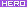
<style>
.page{position:relative;width:27px;height:7px;background:#a051dd}
.page>*{position:absolute;margin:0}
.t1{font:8px "5x5-Pixel";color:#f8fff9}
</style>
<div class="page">
<p class="t1" style="left:2px;top:1px;width:23px;height:5px">hero</p>
</div>
